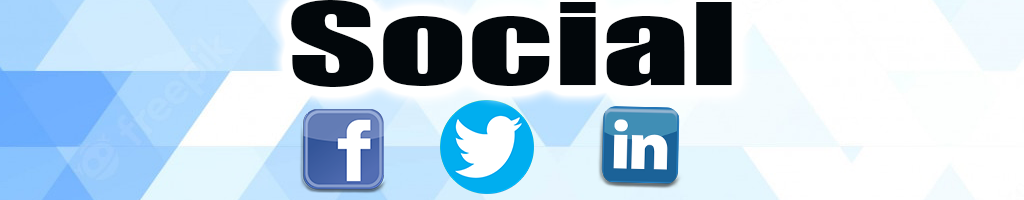
<style>
.page{position:relative;width:1024px;height:200px;background:#ffffff}
.page>*{position:absolute;margin:0}
.t1{font:105px "Impact";color:#02070b;scale:1.67 1}
</style>
<div class="page">
<p class="t1" style="left:291px;top:0px;width:441px;height:87px">Social</p>
</div>
